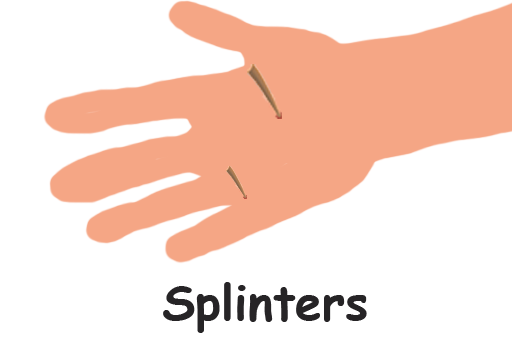
<style>
.page{position:relative;width:515px;height:359px;background:#ffffff}
.page>*{position:absolute;margin:0}
.t1{font:48px "ComicSansMS-Bold";color:#262426}
</style>
<div class="page">
<p class="t1" style="left:163px;top:282px;width:204px;height:51px">Splinters</p>
</div>
